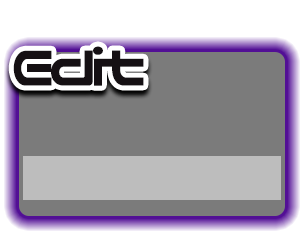
<style>
.page{position:relative;width:300px;height:240px;background:#7b7b7b}
.page>*{position:absolute;margin:0}
.t1{font:60px "NicoKaku";letter-spacing:-0.1em;color:#151013}
</style>
<div class="page">
<p class="t1" style="left:13px;top:46px;width:131px;height:40px">Edit</p>
</div>
